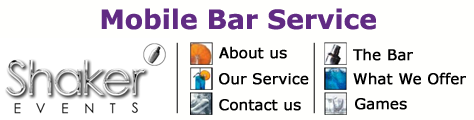
<style>
.page{position:relative;width:474px;height:120px;background:#fffffd}
.page>*{position:absolute;margin:0}
.t1{font:26.7px "Verdana-Bold";color:#612b83}
.t2{font:14.7px "Verdana";color:#000000;font-weight:bold}
</style>
<div class="page">
<p class="t1" style="left:101px;top:8px;width:275px;height:22px">Mobile Bar Service</p>
<p class="t2" style="left:219px;top:46px;width:68px;height:13px">About us</p>
<p class="t2" style="left:353px;top:48px;width:60px;height:13px">The Bar</p>
<p class="t2" style="left:219px;top:73px;width:90px;height:12px">Our Service</p>
<p class="t2" style="left:353px;top:72px;width:113px;height:13px">What We Offer</p>
<p class="t2" style="left:219px;top:99px;width:82px;height:12px">Contact us</p>
<p class="t2" style="left:355px;top:98px;width:52px;height:12px">Games</p>
</div>
